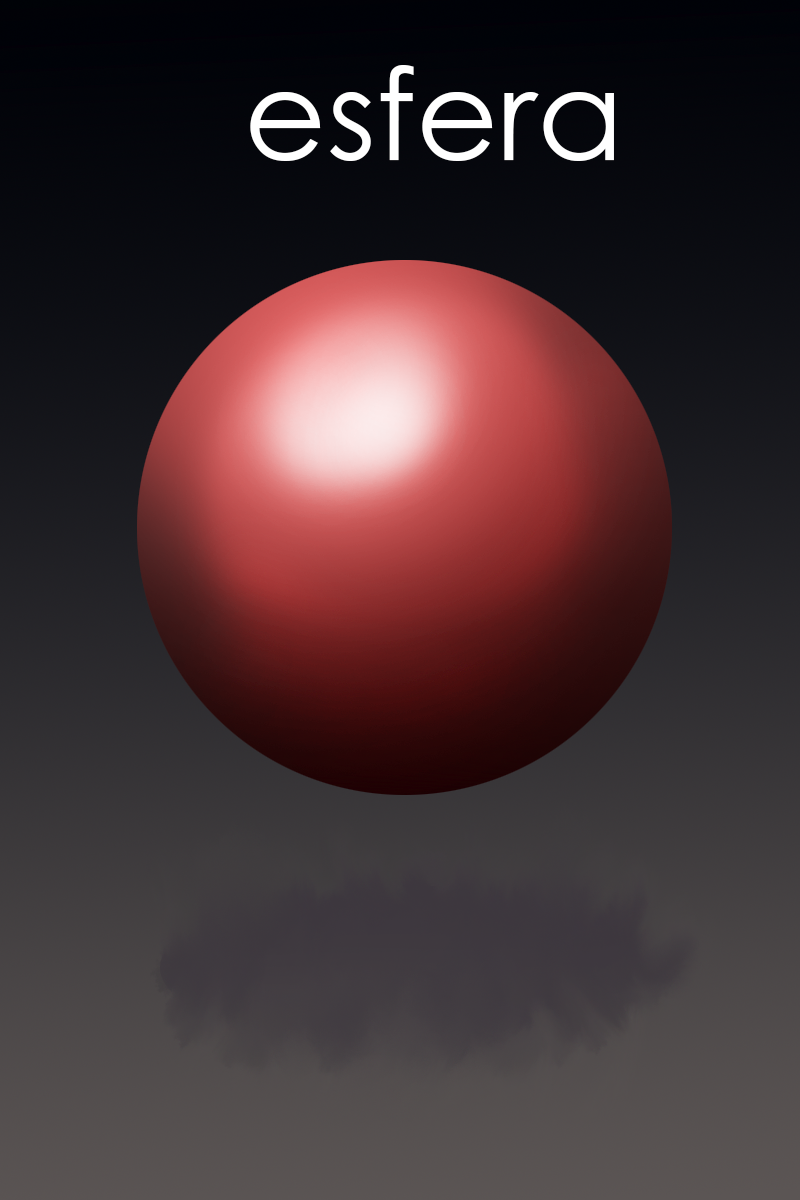
<style>
.page{position:relative;width:800px;height:1200px}
.page>*{position:absolute;margin:0}
.t1{font:127px "CenturyGothic";color:#ffffff}
</style>
<div class="page">
<p class="t1" style="left:250px;top:65px;width:364px;height:96px">esfera</p>
</div>
